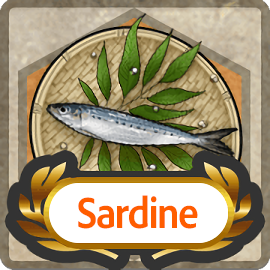
<style>
.page{position:relative;width:270px;height:270px}
.page>*{position:absolute;margin:0}
.t1{font:45px "AdobeClean-Bold";letter-spacing:-0.04em;color:#ff5d00;scale:0.9 1}
</style>
<div class="page">
<p class="t1" style="left:78px;top:195px;width:120px;height:34px">Sardine</p>
</div>
